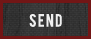
<style>
.page{position:relative;width:91px;height:39px;background:#721616}
.page>*{position:absolute;margin:0}
.t1{font:14px "Bebas";letter-spacing:0.1em;color:#efefef;text-transform:uppercase}
</style>
<div class="page">
<p class="t1" style="left:29px;top:14px;width:33px;height:13px">send</p>
</div>
